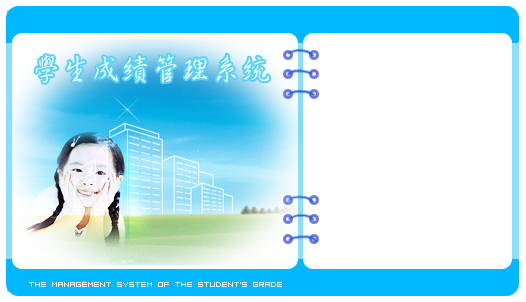
<style>
.page{position:relative;width:526px;height:302px;background:#ffffff}
.page>*{position:absolute;margin:0}
.t1{font:30px "SinsuEG-Medium-T-GB";color:#ebf8fc}
.t2{font:6px "04b08";color:#ebf8fc}
</style>
<div class="page">
<p class="t1" style="left:35px;top:54px;width:234px;height:29px">学生成绩管理系统</p>
<p class="t2" style="left:29px;top:282px;width:253px;height:5px">the management system of the student’s grade</p>
</div>
